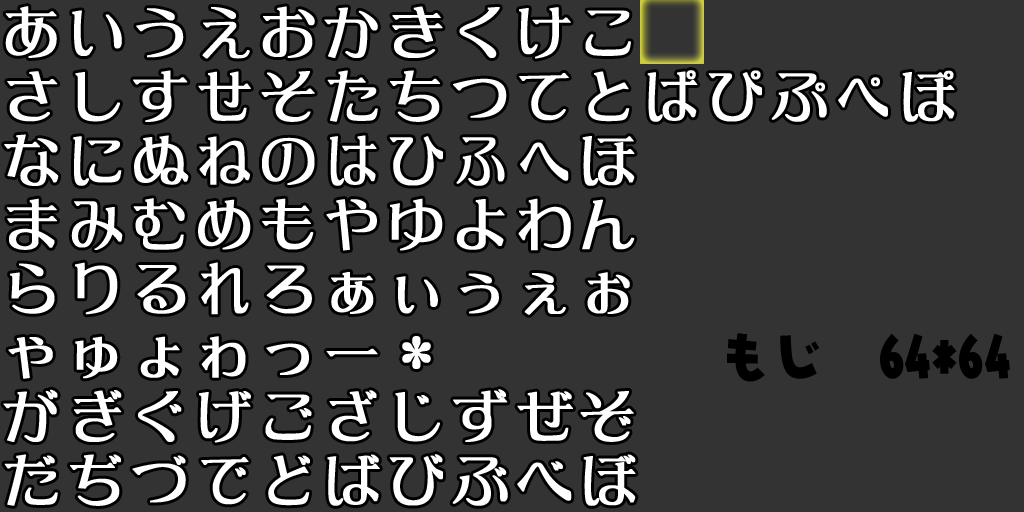
<style>
.page{position:relative;width:1024px;height:512px;background:#333333}
.page>*{position:absolute;margin:0}
.t1{font:54.9px "DFLeiGaSo-W5-WIN-RKSJ-H";color:#ffffff;font-weight:bold}
.t2{font:54.9px "DFLeiGaSo-W5-WIN-RKSJ-H";color:#ffffff;font-weight:bold;scale:0.94 1}
.t3{font:54.9px "DFLeiGaSo-W5-WIN-RKSJ-H";color:#ffffff;font-weight:bold;scale:0.92 1}
.t4{font:51.3px "DFLeiGaSo-W5-WIN-RKSJ-H";color:#ffffff;font-weight:bold;scale:0.97 1}
.t5{font:54.9px "DFLeiGaSo-W5-WIN-RKSJ-H";color:#ffffff;font-weight:bold;scale:0.89 1}
.t6{font:54.9px "DFLeiGaSo-W5-WIN-RKSJ-H";color:#ffffff;font-weight:bold;scale:0.87 1}
.t7{font:54.9px "DFLeiGaSo-W5-WIN-RKSJ-H";color:#ffffff;font-weight:bold;scale:0.93 1}
.t8{font:54.9px "DFLeiGaSo-W5-WIN-RKSJ-H";color:#ffffff;font-weight:bold;scale:0.88 1}
.t9{font:52.9px "NIS-JYA-U-83pv-RKSJ-H";color:#000000}
</style>
<div class="page">
<p class="t1" style="left:5px;top:6px;width:52px;height:52px">あ</p>
<p class="t1" style="left:262px;top:6px;width:53px;height:52px">お</p>
<p class="t1" style="left:392px;top:6px;width:51px;height:52px">き</p>
<p class="t1" style="left:72px;top:10px;width:50px;height:46px">い</p>
<p class="t1" style="left:136px;top:8px;width:48px;height:50px">う</p>
<p class="t2" style="left:202px;top:7px;width:48px;height:52px">え</p>
<p class="t1" style="left:324px;top:7px;width:54px;height:51px">か</p>
<p class="t1" style="left:459px;top:7px;width:41px;height:51px">く</p>
<p class="t1" style="left:519px;top:7px;width:52px;height:52px">け</p>
<p class="t1" style="left:585px;top:10px;width:46px;height:46px">こ</p>
<p class="t1" style="left:7px;top:71px;width:51px;height:51px">さ</p>
<p class="t1" style="left:75px;top:72px;width:45px;height:50px">し</p>
<p class="t1" style="left:133px;top:70px;width:55px;height:52px">す</p>
<p class="t2" style="left:198px;top:71px;width:53px;height:50px">せ</p>
<p class="t1" style="left:261px;top:71px;width:54px;height:51px">そ</p>
<p class="t2" style="left:327px;top:70px;width:51px;height:52px">た</p>
<p class="t1" style="left:390px;top:70px;width:50px;height:52px">ち</p>
<p class="t1" style="left:453px;top:78px;width:54px;height:40px">つ</p>
<p class="t3" style="left:519px;top:73px;width:50px;height:48px">て</p>
<p class="t1" style="left:588px;top:71px;width:42px;height:51px">と</p>
<p class="t2" style="left:647px;top:70px;width:51px;height:52px">ぱ</p>
<p class="t1" style="left:708px;top:70px;width:54px;height:52px">ぴ</p>
<p class="t1" style="left:771px;top:73px;width:56px;height:49px">ぷ</p>
<p class="t3" style="left:838px;top:77px;width:50px;height:40px">ぺ</p>
<p class="t1" style="left:902px;top:70px;width:53px;height:52px">ぽ</p>
<p class="t1" style="left:4px;top:134px;width:55px;height:52px">な</p>
<p class="t1" style="left:73px;top:136px;width:49px;height:50px">に</p>
<p class="t1" style="left:134px;top:135px;width:55px;height:50px">ぬ</p>
<p class="t4" style="left:199px;top:136px;width:51px;height:49px">ね</p>
<p class="t1" style="left:262px;top:137px;width:53px;height:48px">の</p>
<p class="t5" style="left:330px;top:135px;width:47px;height:51px">は</p>
<p class="t1" style="left:389px;top:136px;width:54px;height:50px">ひ</p>
<p class="t6" style="left:456px;top:137px;width:49px;height:49px">ふ</p>
<p class="t1" style="left:582px;top:136px;width:53px;height:50px">ほ</p>
<p class="t5" style="left:520px;top:142px;width:49px;height:39px">へ</p>
<p class="t1" style="left:7px;top:198px;width:50px;height:52px">ま</p>
<p class="t1" style="left:133px;top:198px;width:52px;height:52px">む</p>
<p class="t1" style="left:262px;top:198px;width:52px;height:52px">も</p>
<p class="t1" style="left:390px;top:198px;width:53px;height:53px">ゆ</p>
<p class="t1" style="left:518px;top:198px;width:53px;height:53px">わ</p>
<p class="t2" style="left:71px;top:201px;width:52px;height:49px">み</p>
<p class="t1" style="left:198px;top:199px;width:53px;height:51px">め</p>
<p class="t7" style="left:326px;top:199px;width:51px;height:52px">や</p>
<p class="t1" style="left:456px;top:199px;width:49px;height:51px">よ</p>
<p class="t1" style="left:582px;top:199px;width:53px;height:51px">ん</p>
<p class="t1" style="left:10px;top:263px;width:45px;height:51px">ら</p>
<p class="t1" style="left:75px;top:262px;width:43px;height:53px">り</p>
<p class="t1" style="left:137px;top:265px;width:49px;height:49px">る</p>
<p class="t8" style="left:201px;top:262px;width:48px;height:53px">れ</p>
<p class="t1" style="left:266px;top:265px;width:46px;height:49px">ろ</p>
<p class="t1" style="left:331px;top:272px;width:43px;height:42px">ぁ</p>
<p class="t1" style="left:396px;top:276px;width:42px;height:38px">ぃ</p>
<p class="t1" style="left:460px;top:273px;width:39px;height:41px">ぅ</p>
<p class="t1" style="left:524px;top:273px;width:42px;height:42px">ぇ</p>
<p class="t1" style="left:587px;top:272px;width:43px;height:42px">ぉ</p>
<p class="t1" style="left:8px;top:337px;width:45px;height:42px">ゃ</p>
<p class="t1" style="left:75px;top:336px;width:43px;height:43px">ゅ</p>
<p class="t1" style="left:140px;top:336px;width:40px;height:42px">ょ</p>
<p class="t1" style="left:201px;top:336px;width:45px;height:42px">ゎ</p>
<p class="t1" style="left:402px;top:336px;width:29px;height:33px">*</p>
<p class="t9" style="left:727px;top:333px;width:283px;height:49px">もじ　64*64</p>
<p class="t1" style="left:266px;top:343px;width:43px;height:32px">っ</p>
<p class="t1" style="left:326px;top:348px;width:52px;height:9px">ー</p>
<p class="t1" style="left:3px;top:389px;width:55px;height:53px">が</p>
<p class="t2" style="left:74px;top:390px;width:48px;height:52px">ぎ</p>
<p class="t7" style="left:329px;top:390px;width:48px;height:52px">ざ</p>
<p class="t1" style="left:453px;top:389px;width:55px;height:53px">ず</p>
<p class="t1" style="left:138px;top:391px;width:44px;height:51px">ぐ</p>
<p class="t1" style="left:199px;top:391px;width:52px;height:52px">げ</p>
<p class="t1" style="left:265px;top:394px;width:47px;height:46px">ご</p>
<p class="t1" style="left:395px;top:392px;width:45px;height:50px">じ</p>
<p class="t1" style="left:517px;top:391px;width:56px;height:50px">ぜ</p>
<p class="t1" style="left:580px;top:391px;width:54px;height:51px">ぞ</p>
<p class="t1" style="left:4px;top:454px;width:54px;height:52px">だ</p>
<p class="t1" style="left:70px;top:454px;width:51px;height:52px">ぢ</p>
<p class="t1" style="left:132px;top:455px;width:54px;height:48px">づ</p>
<p class="t8" style="left:201px;top:457px;width:48px;height:48px">で</p>
<p class="t1" style="left:268px;top:455px;width:42px;height:51px">ど</p>
<p class="t1" style="left:327px;top:454px;width:53px;height:52px">ば</p>
<p class="t1" style="left:389px;top:454px;width:54px;height:52px">び</p>
<p class="t1" style="left:452px;top:457px;width:56px;height:49px">ぶ</p>
<p class="t1" style="left:517px;top:461px;width:55px;height:40px">べ</p>
<p class="t1" style="left:583px;top:454px;width:53px;height:52px">ぼ</p>
</div>
